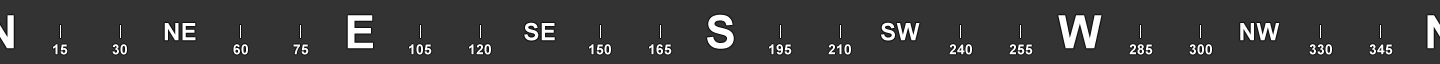
<style>
.page{position:relative;width:1440px;height:64px;background:#333333}
.page>*{position:absolute;margin:0}
.t1{font:46px "Arial-BoldMT";letter-spacing:0.02em;color:#ffffff}
.t2{font:24px "Arial-BoldMT";letter-spacing:0.02em;color:#ffffff}
.t3{font:14px "Arial-BoldMT";letter-spacing:0.02em;color:#ffffff}
</style>
<div class="page">
<p class="t1" style="left:347px;top:15px;width:26px;height:34px">E</p>
<p class="t1" style="left:707px;top:14px;width:27px;height:35px">S</p>
<p class="t1" style="left:1058px;top:15px;width:44px;height:34px">W</p>
<p class="t2" style="left:164px;top:23px;width:32px;height:18px">NE</p>
<p class="t2" style="left:524px;top:22px;width:31px;height:19px">SE</p>
<p class="t2" style="left:881px;top:22px;width:39px;height:19px">SW</p>
<p class="t2" style="left:1240px;top:23px;width:40px;height:18px">NW</p>
<p class="t3" style="left:53px;top:44px;width:15px;height:11px">15</p>
<p class="t3" style="left:112px;top:44px;width:15px;height:11px">30</p>
<p class="t3" style="left:233px;top:44px;width:15px;height:11px">60</p>
<p class="t3" style="left:293px;top:44px;width:16px;height:11px">75</p>
<p class="t3" style="left:409px;top:44px;width:23px;height:11px">105</p>
<p class="t3" style="left:469px;top:44px;width:22px;height:11px">120</p>
<p class="t3" style="left:589px;top:44px;width:22px;height:11px">150</p>
<p class="t3" style="left:649px;top:44px;width:23px;height:11px">165</p>
<p class="t3" style="left:769px;top:44px;width:23px;height:11px">195</p>
<p class="t3" style="left:828px;top:44px;width:23px;height:11px">210</p>
<p class="t3" style="left:949px;top:44px;width:23px;height:11px">240</p>
<p class="t3" style="left:1009px;top:44px;width:24px;height:11px">255</p>
<p class="t3" style="left:1129px;top:44px;width:24px;height:11px">285</p>
<p class="t3" style="left:1189px;top:44px;width:23px;height:11px">300</p>
<p class="t3" style="left:1309px;top:44px;width:23px;height:11px">330</p>
<p class="t3" style="left:1369px;top:44px;width:24px;height:11px">345</p>
</div>
